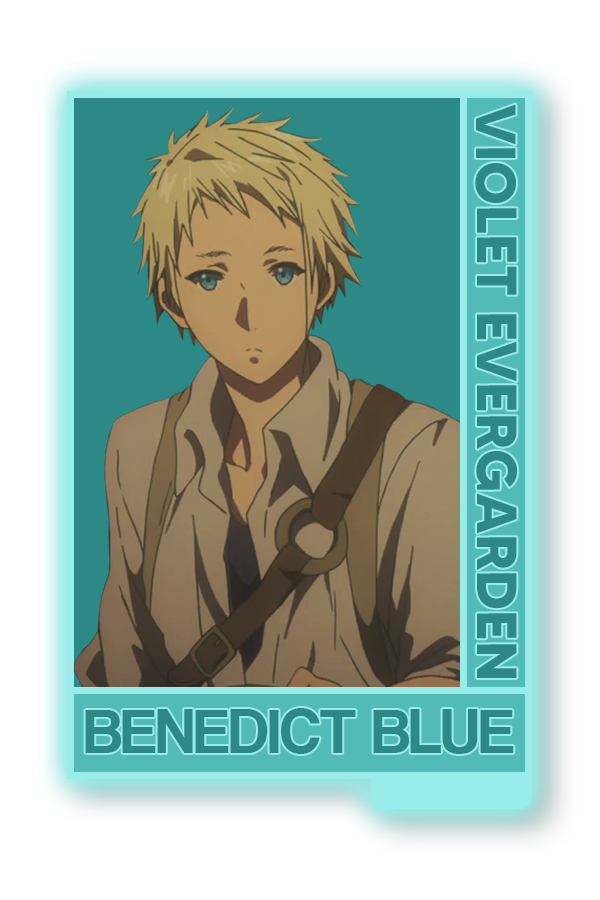
<style>
.page{position:relative;width:600px;height:900px;background:#ffffff}
.page>*{position:absolute;margin:0}
.t1{font:56.4px "MADETOMMY-Bold";color:#2c8986}
.t2{font:64.9px "CoolveticaRg-Regular";color:#2c8986}
</style>
<div class="page">
<p class="t1" style="left:475px;top:104px;width:43px;height:574px;rotate:90deg">VIOLET EVERGARDEN</p>
<p class="t2" style="left:85px;top:708px;width:429px;height:46px">BENEDICT BLUE</p>
</div>
